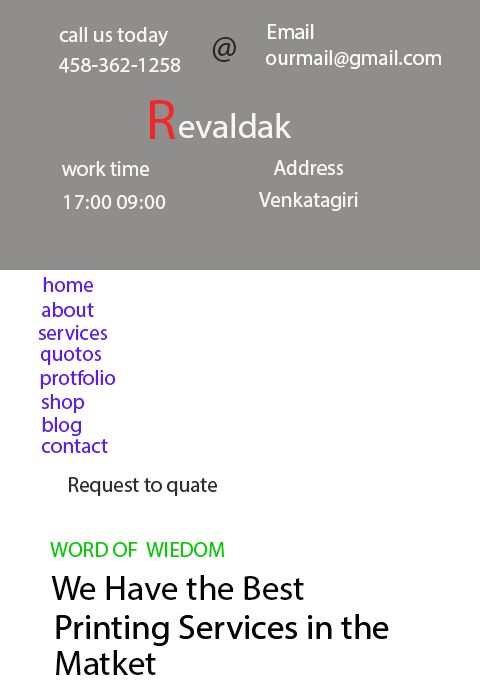
<style>
.page{position:relative;width:480px;height:700px;background:#ffffff}
.page>*{position:absolute;margin:0}
.t1{font:21.2px "MyriadHebrew-Regular";color:#faf6f6}
.t2{font:21.2px "MyriadHebrew-Regular";color:#fcf9f9}
.t3{font:35.3px "MyriadHebrew-Regular";color:#282828}
.t4{font:56.4px "MyriadHebrew-Regular";color:#f02828}
.t5{font:35.3px "MyriadHebrew-Regular";color:#f7f5f5}
.t6{font:21.2px "MyriadHebrew-Regular";color:#f7f5f5}
.t7{font:21.2px "MyriadHebrew-Regular";color:#5f1aec}
.t8{font:21.2px "MyriadHebrew-Regular";color:#332c2c}
.t9{font:21.2px "MyriadHebrew-Regular";color:#0dc809}
.t10{font:35.3px "MyriadHebrew-Regular";color:#040404}
</style>
<div class="page">
<p class="t1" style="left:59px;top:27px;width:109px;height:20px">call us today</p>
<p class="t2" style="left:268px;top:24px;width:46px;height:15px">Email</p>
<p class="t3" style="left:212px;top:37px;width:24px;height:25px">@</p>
<p class="t2" style="left:266px;top:50px;width:175px;height:19px">ourmail@gmail.com</p>
<p class="t1" style="left:59px;top:58px;width:122px;height:15px">458-362-1258</p>
<p class="t4" style="left:150px;top:100px;width:26px;height:39px">R</p>
<p class="t5" style="left:179px;top:113px;width:113px;height:25px">evaldak</p>
<p class="t6" style="left:61px;top:161px;width:88px;height:15px">work time</p>
<p class="t6" style="left:273px;top:160px;width:70px;height:15px">Address</p>
<p class="t6" style="left:64px;top:195px;width:102px;height:14px">09:00 17:00</p>
<p class="t6" style="left:259px;top:192px;width:99px;height:19px">Venkatagiri</p>
<p class="t7" style="left:42px;top:277px;width:52px;height:40px">home<br>about</p>
<p class="t7" style="left:38px;top:325px;width:69px;height:15px">services</p>
<p class="t7" style="left:40px;top:347px;width:61px;height:18px">quotos</p>
<p class="t7" style="left:40px;top:370px;width:76px;height:19px">protfolio</p>
<p class="t7" style="left:41px;top:394px;width:44px;height:19px">shop</p>
<p class="t7" style="left:42px;top:417px;width:39px;height:19px">blog</p>
<p class="t7" style="left:41px;top:439px;width:67px;height:14px">contact</p>
<p class="t8" style="left:69px;top:477px;width:148px;height:19px">Request to quate</p>
<p class="t9" style="left:50px;top:542px;width:174px;height:15px">WORD OF  WIEDOM</p>
<p class="t10" style="left:51px;top:575px;width:253px;height:25px">We Have the Best</p>
<p class="t10" style="left:56px;top:614px;width:333px;height:32px">Printing Services in the</p>
<p class="t10" style="left:56px;top:650px;width:100px;height:25px">Matket</p>
</div>
